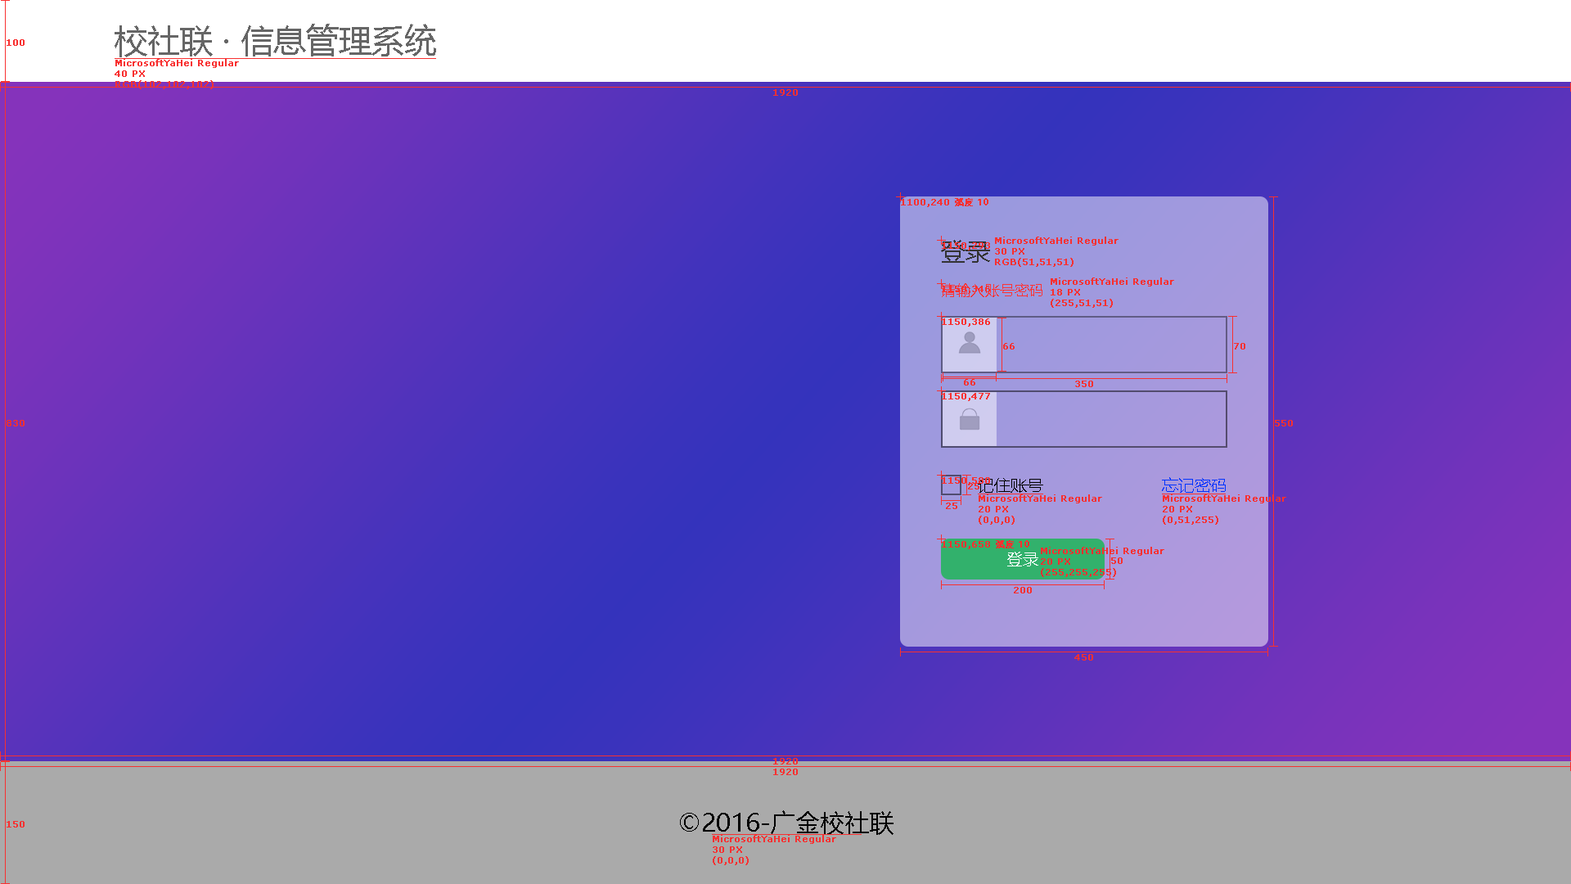
<style>
.page{position:relative;width:1571px;height:884px}
.page>*{position:absolute;margin:0}
.t1{font:32.7px "MicrosoftYaHei";color:#666666}
.t2{font:9px "Verdana";color:#f83030;font-weight:bold}
.t3{font:9px "AdobeHeitiStd-Regular";color:#f83030;font-weight:bold}
.t4{font:24.5px "MicrosoftYaHei";color:#333333}
.t5{font:14.7px "MicrosoftYaHei";color:#ff3333}
.t6{font:16.4px "MicrosoftYaHei";color:#000000}
.t7{font:16.4px "MicrosoftYaHei";color:#0033ff}
.t8{font:16.4px "MicrosoftYaHei";color:#ffffff}
.t9{font:24.5px "MicrosoftYaHei";color:#000000}
</style>
<div class="page">
<p class="t1" style="left:115px;top:24px;width:321px;height:33px">校社联 · 信息管理系统</p>
<p class="t2" style="left:7px;top:39px;width:18px;height:7px">100</p>
<p class="t2" style="left:115px;top:59px;width:124px;height:30px">MicrosoftYaHei Regular<br>40 PX<br>RGB(102,102,102)</p>
<p class="t2" style="left:773px;top:89px;width:25px;height:7px">1920</p>
<p class="t2" style="left:901px;top:198px;width:87px;height:9px">1100,240 <span class="t3">弧度 10</span></p>
<p class="t4" style="left:941px;top:240px;width:49px;height:23px">登录</p>
<p class="t2" style="left:942px;top:242px;width:48px;height:8px">1150,293</p>
<p class="t2" style="left:995px;top:236px;width:123px;height:31px">MicrosoftYaHei Regular<br>30 PX<br>RGB(51,51,51)</p>
<p class="t2" style="left:1051px;top:277px;width:123px;height:31px">MicrosoftYaHei Regular<br>18 PX<br>(255,51,51)</p>
<p class="t5" style="left:941px;top:283px;width:101px;height:14px">请输入账号密码</p>
<p class="t2" style="left:942px;top:286px;width:48px;height:8px">1150,346</p>
<p class="t2" style="left:942px;top:318px;width:48px;height:8px">1150,386</p>
<p class="t2" style="left:1003px;top:343px;width:12px;height:6px">66</p>
<p class="t2" style="left:1234px;top:343px;width:11px;height:6px">70</p>
<p class="t2" style="left:964px;top:379px;width:11px;height:6px">66</p>
<p class="t2" style="left:1075px;top:380px;width:18px;height:7px">350</p>
<p class="t2" style="left:942px;top:393px;width:48px;height:8px">1150,477</p>
<p class="t2" style="left:7px;top:420px;width:18px;height:6px">830</p>
<p class="t2" style="left:1275px;top:420px;width:18px;height:6px">550</p>
<p class="t2" style="left:942px;top:477px;width:48px;height:8px">1150,580</p>
<p class="t2" style="left:968px;top:483px;width:11px;height:6px">25</p>
<p class="t6" style="left:978px;top:478px;width:65px;height:15px">记住账号</p>
<p class="t7" style="left:1162px;top:477px;width:64px;height:16px">忘记密码</p>
<p class="t2" style="left:979px;top:494px;width:123px;height:30px">MicrosoftYaHei Regular<br>20 PX<br>(0,0,0)</p>
<p class="t2" style="left:1163px;top:494px;width:123px;height:30px">MicrosoftYaHei Regular<br>20 PX<br>(0,51,255)</p>
<p class="t2" style="left:946px;top:502px;width:11px;height:7px">25</p>
<p class="t2" style="left:942px;top:540px;width:87px;height:9px">1150,658 <span class="t3">弧度 10</span></p>
<p class="t8" style="left:1007px;top:551px;width:31px;height:15px">登录</p>
<p class="t2" style="left:1041px;top:547px;width:123px;height:30px">MicrosoftYaHei Regular<br>20 PX<br>(255,255,255)</p>
<p class="t2" style="left:1111px;top:557px;width:12px;height:7px">50</p>
<p class="t2" style="left:1014px;top:587px;width:18px;height:6px">200</p>
<p class="t2" style="left:1074px;top:654px;width:19px;height:6px">450</p>
<p class="t2" style="left:773px;top:758px;width:25px;height:6px">1920</p>
<p class="t2" style="left:773px;top:768px;width:25px;height:7px">1920</p>
<p class="t2" style="left:7px;top:821px;width:18px;height:6px">150</p>
<p class="t9" style="left:680px;top:810px;width:213px;height:25px">©2016-广金校社联</p>
<p class="t2" style="left:713px;top:835px;width:123px;height:30px">MicrosoftYaHei Regular<br>30 PX<br>(0,0,0)</p>
</div>
